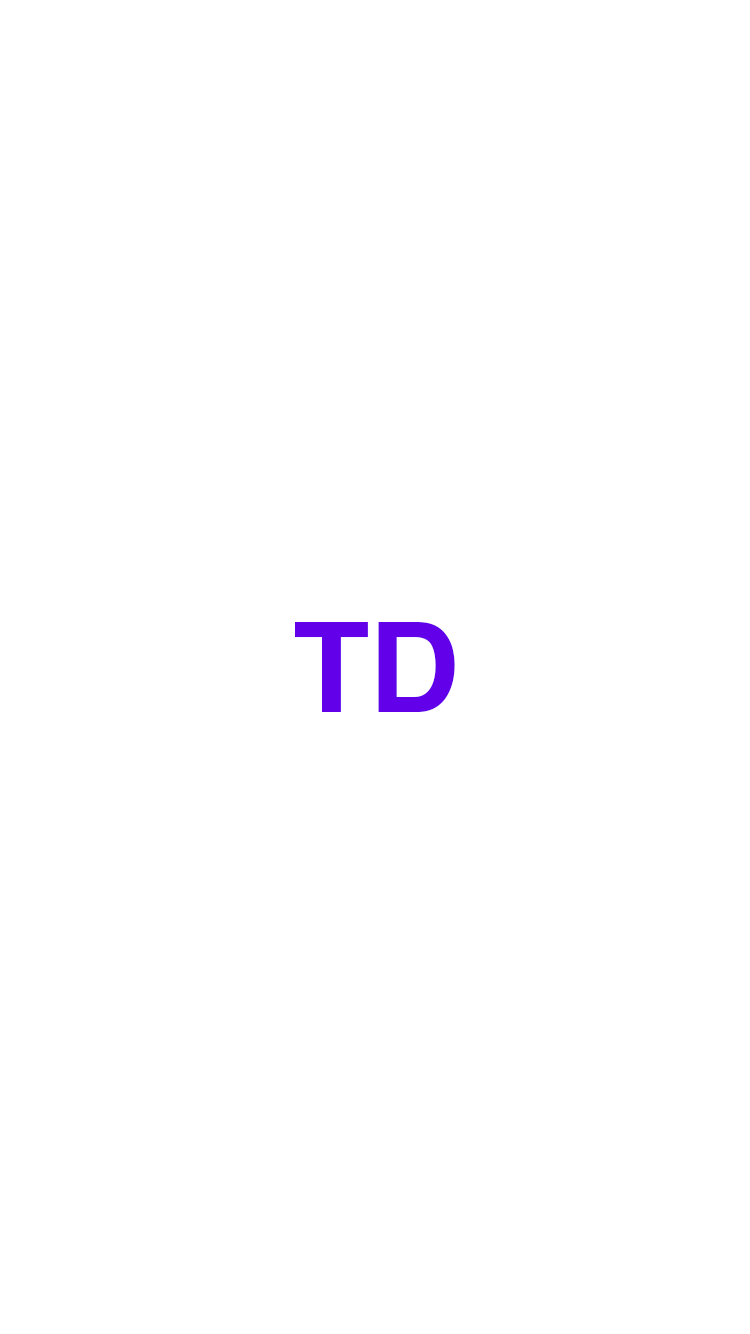
<style>
.page{position:relative;width:750px;height:1334px;background:#ffffff}
.page>*{position:absolute;margin:0}
.t1{font:125px "Helvetica-Bold";color:#6200ea}
</style>
<div class="page">
<p class="t1" style="left:295px;top:622px;width:160px;height:90px">TD</p>
</div>
